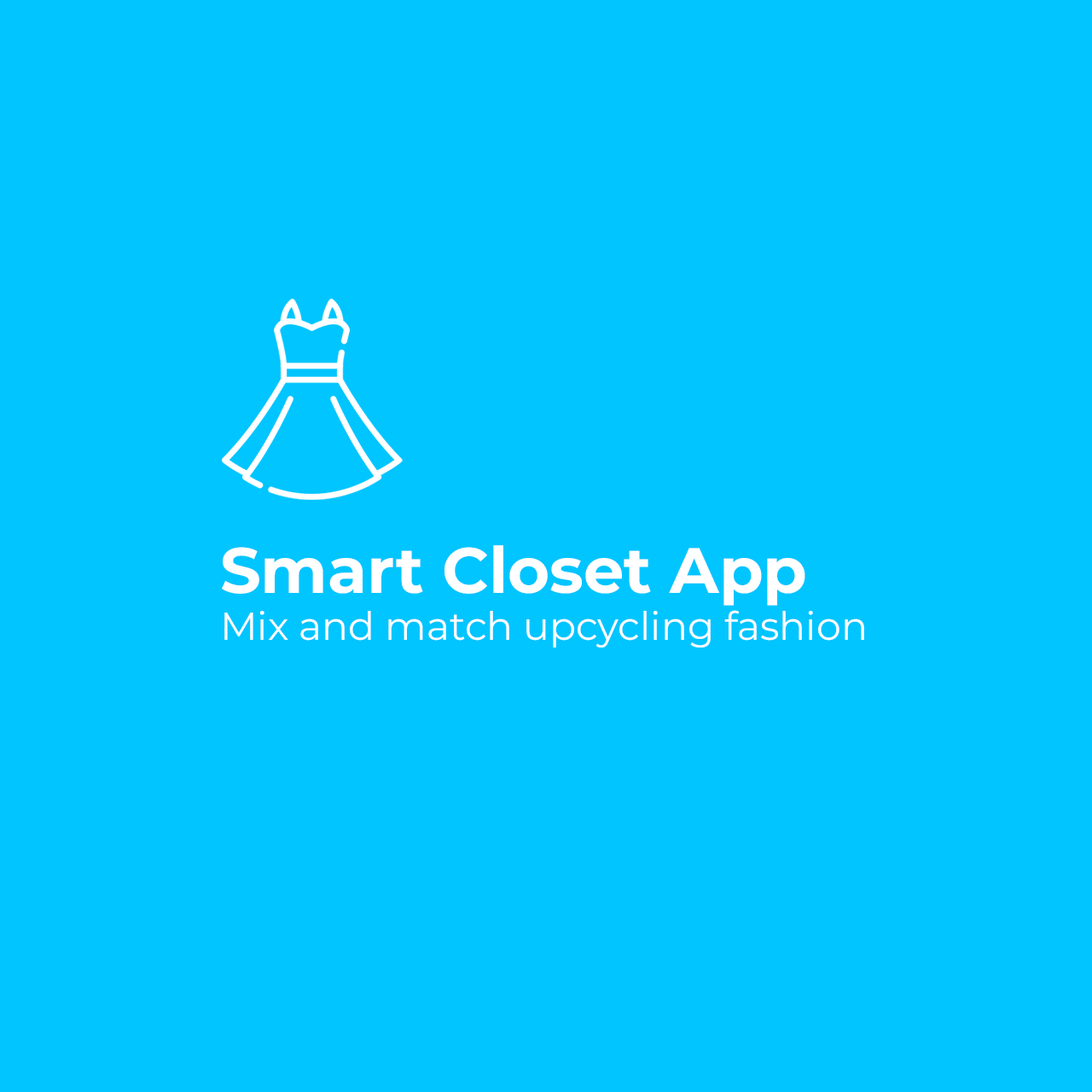
<style>
.page{position:relative;width:1092px;height:1092px;background:#01c5ff}
.page>*{position:absolute;margin:0}
.t1{font:39.1px "Montserrat-Regular";color:#ffffff}
.t2{font:64px "Montserrat-Bold";color:#ffffff}
</style>
<div class="page">
<p class="t1" style="left:222px;top:545px;width:642px;height:103px"><span class="t2">Smart Closet App</span><br>Mix and match upcycling fashion</p>
</div>
